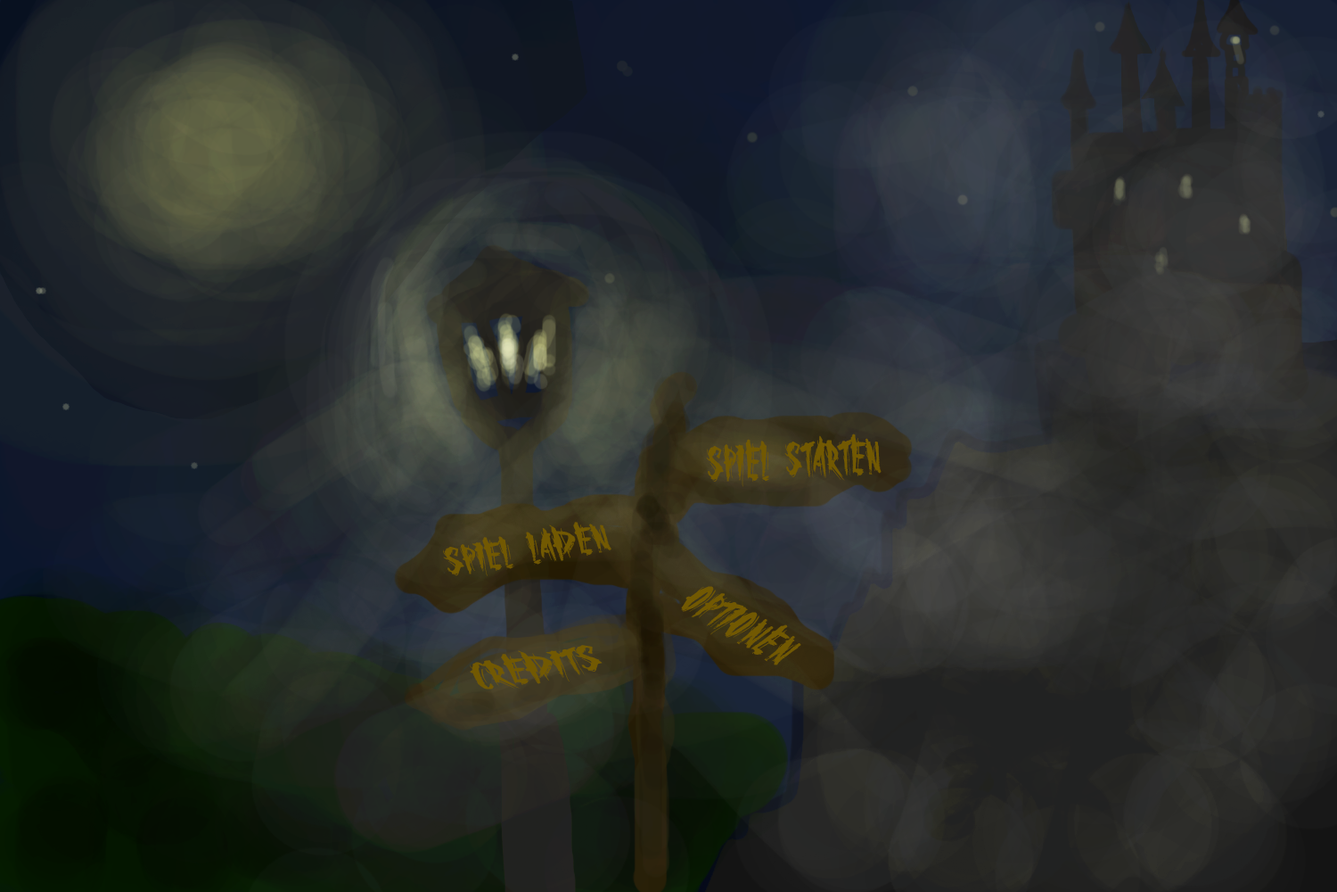
<style>
.page{position:relative;width:1337px;height:892px}
.page>*{position:absolute;margin:0}
.t1{font:51.9px "TheOthersAreHere";color:#725902;scale:1.2 1}
.t2{font:43.5px "TheOthersAreHere";color:#725902;scale:1.54 1}
.t3{font:55px "TheOthersAreHere";color:#725902;scale:1.21 1}
.t4{font:43.9px "TheOthersAreHere";color:#725902;scale:1.84 1}
</style>
<div class="page">
<p class="t1" style="left:706px;top:433px;width:176px;height:54px;rotate:-3deg">Spiel starten</p>
<p class="t2" style="left:443px;top:522px;width:169px;height:54px;rotate:-10deg">Spiel laden</p>
<p class="t3" style="left:681px;top:586px;width:121px;height:79px;rotate:30deg">Optionen</p>
<p class="t4" style="left:470px;top:645px;width:133px;height:44px;rotate:-9deg">Credits</p>
</div>
